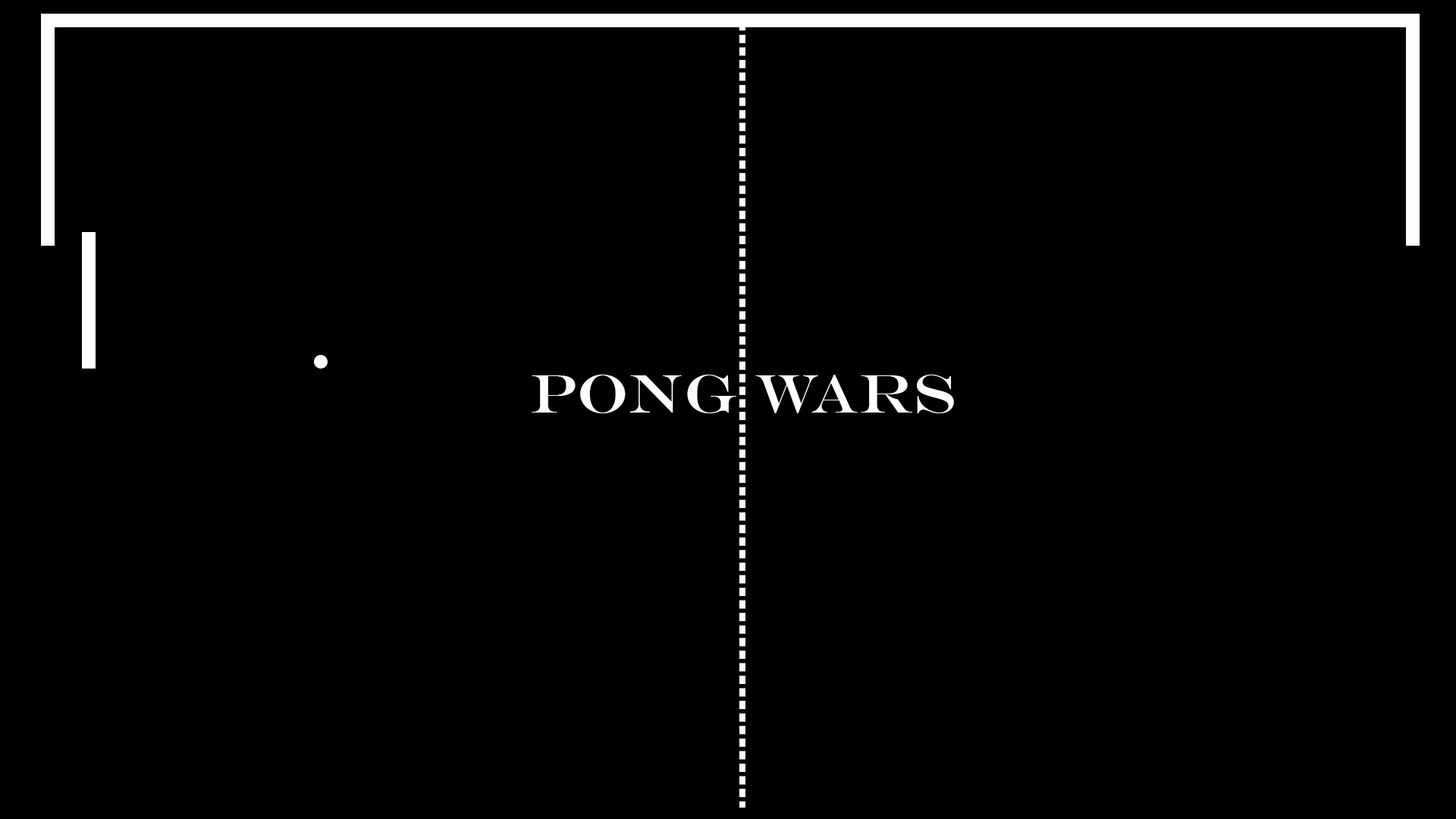
<style>
.page{position:relative;width:1456px;height:819px;background:#000000}
.page>*{position:absolute;margin:0}
.t1{font:54.6px "EngraversMT";color:#ffffff}
</style>
<div class="page">
<p class="t1" style="left:532px;top:375px;width:422px;height:38px">Pong Wars</p>
</div>
